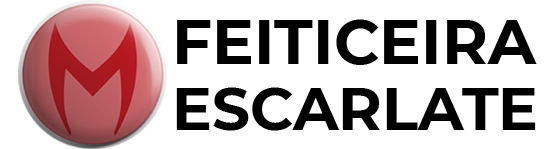
<style>
.page{position:relative;width:552px;height:149px;background:#ffffff}
.page>*{position:absolute;margin:0}
.t1{font:62.2px "Montserrat-Bold";color:#000000}
.t2{font:59.4px "Montserrat-Bold";color:#000000}
</style>
<div class="page">
<p class="t1" style="left:177px;top:19px;width:360px;height:46px">FEITICEIRA</p>
<p class="t2" style="left:176px;top:87px;width:360px;height:44px">ESCARLATE</p>
</div>
